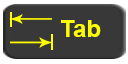
<style>
.page{position:relative;width:128px;height:64px;background:#383838}
.page>*{position:absolute;margin:0}
.t1{font:24px "Arial-BoldMT";color:#ffff00}
</style>
<div class="page">
<p class="t1" style="left:61px;top:20px;width:40px;height:17px">Tab</p>
</div>
